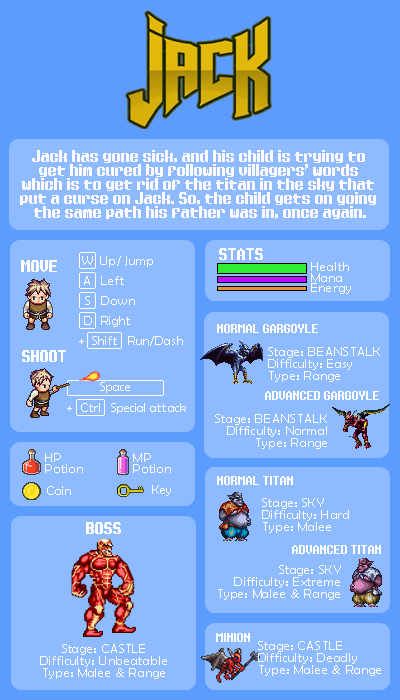
<style>
.page{position:relative;width:400px;height:700px;background:#8ebaff}
.page>*{position:absolute;margin:0}
.t1{font:13px/14px "Eight-Bit-Dragon";color:#fefaff}
.t2{font:12.5px/20px "BerlinSansFB-Reg";letter-spacing:0.05em;color:#ffffff}
.t3{font:12.5px/20px "BerlinSansFB-Reg";letter-spacing:0.03em;color:#ffffff}
.t4{font:12.5px/20px "BerlinSansFB-Reg";letter-spacing:-0.15em;color:#ffffff}
.t5{font:12.5px/20px "BerlinSansFB-Reg";letter-spacing:-0.05em;color:#ffffff}
.t6{font:12.5px/20px "BerlinSansFB-Reg";letter-spacing:-0.1em;color:#ffffff}
.t7{font:12.5px "Eight-Bit-Dragon";color:#ffffff}
.t8{font:12.5px/10.4px "BerlinSansFB-Reg";letter-spacing:0.075em;color:#ffffff}
.t9{font:12.5px/10.4px "BerlinSansFB-Reg";letter-spacing:0.05em;color:#ffffff}
.t10{font:10.4px "Eight-Bit-Dragon";color:#ffffff}
.t11{font:12.5px "BerlinSansFB-Reg";letter-spacing:0.05em;color:#ffffff}
.t12{font:12.5px/12px "BerlinSansFB-Reg";letter-spacing:0.05em;color:#ffffff}
.t13{font:12.5px "BerlinSansFB-Reg";color:#ffffff}
.t14{font:12.5px "BerlinSansFB-Reg";letter-spacing:0.075em;color:#ffffff}
.t15{font:12.5px "BerlinSansFB-Reg";letter-spacing:0.005em;color:#ffffff}
.t16{font:12.5px "BerlinSansFB-Reg";letter-spacing:0.1em;color:#ffffff}
.t17{font:12.5px/10.4px "BerlinSansFB-Reg";color:#ffffff}
.t18{font:12.5px/10.4px "BerlinSansFB-Reg";letter-spacing:-0.025em;color:#ffffff}
</style>
<div class="page">
<p class="t1" style="left:20px;top:150px;width:356px;height:69px;text-align:center">Jack has gone sick, and his child is trying to <br>get him cured by following villagers’ words <br>which is to get rid of the titan in the sky that <br>put a curse on Jack. So, the child gets on going <br>the same path his father was in, once again.</p>
<p class="t2" style="left:82px;top:256px;width:71px;height:71px">W  <span class="t3">U</span>p/ Jump<br> <span class="t4">A</span>   Left<br><span class="t5"> S     </span>Down<br><span class="t6"> D   </span>Right</p>
<p class="t7" style="left:219px;top:248px;width:44px;height:12px">STATS</p>
<p class="t7" style="left:21px;top:260px;width:36px;height:12px">MOVE</p>
<p class="t8" style="left:311px;top:262px;width:40px;height:32px"><span class="t9">Health<br></span>Mana<br>Energy</p>
<p class="t10" style="left:217px;top:324px;width:101px;height:9px">NORMAL GARGOYLE</p>
<p class="t11" style="left:79px;top:336px;width:104px;height:10px">+  Shift  Run/Dash</p>
<p class="t7" style="left:22px;top:350px;width:44px;height:12px">SHOOT</p>
<p class="t12" style="left:268px;top:347px;width:112px;height:35px">Stage: BEANSTALK<br>Difficulty: Easy<br>Type: Range</p>
<p class="t13" style="left:100px;top:382px;width:30px;height:11px">Space</p>
<p class="t10" style="left:265px;top:391px;width:114px;height:9px">ADVANCED GARGOYLE</p>
<p class="t13" style="left:67px;top:403px;width:119px;height:11px">+   <span class="t14">Ctrl  </span><span class="t15">Sp</span>ecial a<span class="t16">tt</span>ack</p>
<p class="t12" style="left:215px;top:414px;width:112px;height:35px;text-align:right">Stage: BEANSTALK<br>Difficulty: Normal<br>Type: Range</p>
<p class="t8" style="left:45px;top:453px;width:38px;height:20px"><span class="t17">HP<br></span>Potion</p>
<p class="t8" style="left:133px;top:453px;width:38px;height:20px"><span class="t18">M P<br></span>Potion</p>
<p class="t11" style="left:47px;top:486px;width:24px;height:9px">Coin</p>
<p class="t13" style="left:152px;top:485px;width:19px;height:11px">Key</p>
<p class="t10" style="left:217px;top:476px;width:76px;height:9px">NORMAL TITAN</p>
<p class="t12" style="left:262px;top:498px;width:87px;height:35px">Stage: SKY<br>Difficulty: Hard<br>Type: Malee</p>
<p class="t7" style="left:86px;top:522px;width:35px;height:12px">BOSS</p>
<p class="t10" style="left:292px;top:545px;width:89px;height:9px">ADVANCED TITAN</p>
<p class="t12" style="left:218px;top:565px;width:123px;height:35px;text-align:right">Stage: SKY<br>Difficulty: Extreme<br>Type: Malee &amp; Range</p>
<p class="t10" style="left:216px;top:633px;width:34px;height:9px">MINION</p>
<p class="t12" style="left:258px;top:641px;width:123px;height:35px">Stage: CASTLE<br>Difficulty: Deadly<br>Type: Malee &amp; Range</p>
<p class="t12" style="left:40px;top:644px;width:127px;height:35px;text-align:center">Stage: CASTLE<br>Difficulty: Unbeatable<br>Type: Malee &amp; Range</p>
</div>
